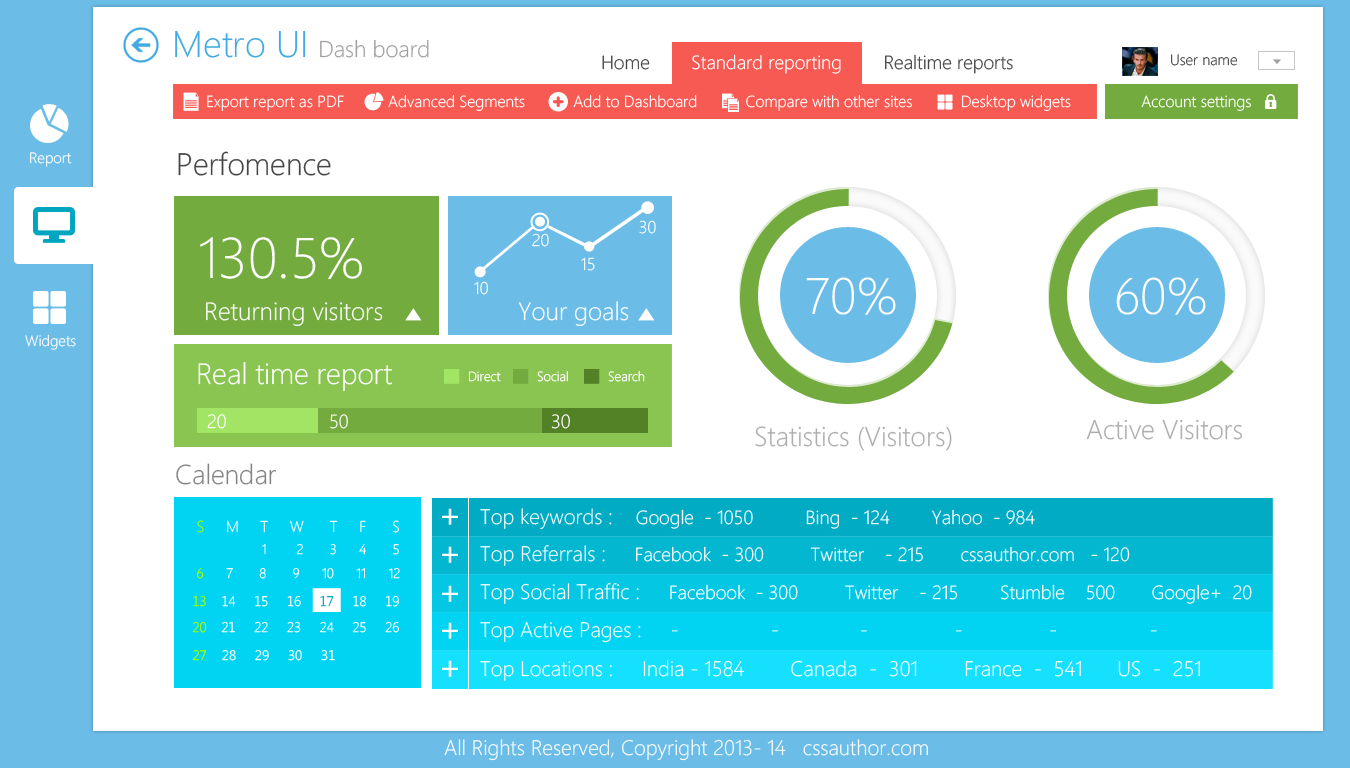
<style>
.page{position:relative;width:1350px;height:768px;background:#ffffff}
.page>*{position:absolute;margin:0}
.t1{font:23px "SegoeWP-Light";color:#9f9f9f}
.t2{font:37px "SegoeWP-Light";color:#41aae1}
.t3{font:19px "SegoeWP-Light";color:#ffffff}
.t4{font:19px "SegoeWP-Light";color:#454545}
.t5{font:15px "SegoeWP-Light"}
.t6{font:16px "SegoeWP-Light";color:#ffffff}
.t7{font:15px "SegoeWP-Light";color:#ffffff}
.t8{font:31px "SegoeWP-Light";color:#454545}
.t9{font:17px "SegoeWP-Light";color:#ffffff}
.t10{font:57.2px "SegoeWP-Light";color:#ffffff}
.t11{font:51.2px "SegoeWP-Light";color:#ffffff}
.t12{font:25px "SegoeWP-Light";color:#ffffff}
.t13{font:29.2px "SegoeWP-Light";color:#ffffff}
.t14{font:13.2px "SegoeWP-Light";color:#ffffff}
.t15{font:27.2px "SegoeWP-Light";color:#aeacac}
.t16{font:27.2px "SegoeWP-Light";color:#838383}
.t17{font:35px "SegoeWPN";color:#ffffff}
.t18{font:21px "SegoeWP-Light";color:#ffffff}
.t19{font:15.7px "SegoeWP-Light";color:#ffffff}
.t20{font:15.7px "SegoeWP-Light";color:#a1fe00}
.t21{font:13.7px "SegoeWP-Light";color:#ffffff}
.t22{font:13.7px "SegoeWP-Light";color:#a2ff00}
.t23{font:13.7px "SegoeWPN-Light";color:#ffffff}
.t24{font:13.7px "SegoeWPN-Light";color:#a2ff00}
.t25{font:13.7px "SegoeWPN-Light";color:#01abc4}
.t26{font:13.7px "SegoeWPN-Light";color:#a2ff01}
.t27{font:13.7px "SegoeWPN-SemiLight";color:#ffffff}
.t28{font:13.7px "SegoeWPN-SemiLight";color:#a2ff00}
</style>
<div class="page">
<p class="t1" style="left:175px;top:30px;width:254px;height:28px"><span class="t2">Metro UI </span>Dash board</p>
<p class="t3" style="left:602px;top:54px;width:411px;height:20px"><span class="t4">Home        </span>Standard reporting  <span class="t4">      Realtime reports</span></p>
<p class="t5" style="left:1171px;top:54px;width:67px;height:12px">User name</p>
<p class="t6" style="left:207px;top:95px;width:1044px;height:16px">Export report as PDF          Advanced Segments           Add to Dashboard           Compare with other sites           Desktop widgets                Account settings</p>
<p class="t7" style="left:30px;top:152px;width:42px;height:15px">Report</p>
<p class="t8" style="left:178px;top:151px;width:153px;height:25px">Perfomence</p>
<p class="t9" style="left:639px;top:220px;width:17px;height:14px">30</p>
<p class="t9" style="left:532px;top:233px;width:17px;height:14px">20</p>
<p class="t10" style="left:200px;top:237px;width:162px;height:42px">130.5%</p>
<p class="t9" style="left:581px;top:257px;width:14px;height:14px">15</p>
<p class="t9" style="left:474px;top:281px;width:14px;height:14px">10</p>
<p class="t11" style="left:806px;top:277px;width:90px;height:38px">70%</p>
<p class="t11" style="left:1116px;top:277px;width:90px;height:38px">60%</p>
<p class="t12" style="left:206px;top:302px;width:177px;height:24px">Returning visitors</p>
<p class="t12" style="left:518px;top:301px;width:111px;height:25px">Your goals</p>
<p class="t7" style="left:25px;top:334px;width:51px;height:16px">Widgets</p>
<p class="t13" style="left:198px;top:362px;width:194px;height:29px">Real time report</p>
<p class="t14" style="left:469px;top:371px;width:32px;height:11px">Direct</p>
<p class="t14" style="left:537px;top:371px;width:31px;height:11px">Social</p>
<p class="t14" style="left:608px;top:371px;width:37px;height:11px">Search</p>
<p class="t3" style="left:207px;top:414px;width:19px;height:15px">20</p>
<p class="t3" style="left:330px;top:414px;width:18px;height:15px">50</p>
<p class="t3" style="left:551px;top:414px;width:19px;height:15px">30</p>
<p class="t15" style="left:1086px;top:419px;width:156px;height:21px">Active Visitors</p>
<p class="t15" style="left:755px;top:426px;width:197px;height:25px">Statistics (Visitors)</p>
<p class="t16" style="left:176px;top:463px;width:101px;height:22px">Calendar</p>
<p class="t17" style="left:442px;top:508px;width:16px;height:17px">+</p>
<p class="t3" style="left:480px;top:508px;width:555px;height:22px"><span class="t18">Top keywords :    </span>Google  - 1050          Bing  - 124        Yahoo  - 984</p>
<p class="t19" style="left:197px;top:520px;width:203px;height:13px"><span class="t20">S</span>     M     T     W      T     F      S</p>
<p class="t21" style="left:262px;top:544px;width:137px;height:11px">1        2       3      4       5</p>
<p class="t3" style="left:480px;top:545px;width:650px;height:21px"><span class="t18">Top Referrals :     </span>Facebook  - 300         Twitter    - 215       cssauthor.com   - 120</p>
<p class="t17" style="left:442px;top:546px;width:16px;height:17px">+</p>
<p class="t21" style="left:197px;top:568px;width:203px;height:11px"><span class="t22">6</span>      7       8       9      10      11      12</p>
<p class="t17" style="left:442px;top:585px;width:16px;height:17px">+</p>
<p class="t3" style="left:480px;top:583px;width:772px;height:21px"><span class="t18">Top Social Traffic :     </span>Facebook  - 300         Twitter    - 215        Stumble    500       Google+  20</p>
<p class="t23" style="left:193px;top:595px;width:206px;height:12px"><span class="t24">13</span>    14     15     16     <span class="t25">17 </span>    18     19</p>
<p class="t23" style="left:192px;top:621px;width:207px;height:12px"><span class="t26">20</span>    21     22     23     24     25     26</p>
<p class="t17" style="left:442px;top:622px;width:16px;height:17px">+</p>
<p class="t18" style="left:480px;top:622px;width:677px;height:21px">Top Active Pages :     -                -              -               -               -                -</p>
<p class="t27" style="left:192px;top:650px;width:143px;height:11px"><span class="t28">27</span>    28     29     30     31</p>
<p class="t17" style="left:442px;top:660px;width:16px;height:17px">+</p>
<p class="t18" style="left:480px;top:660px;width:720px;height:21px">Top Locations :     India - 1584        Canada  -  301        France  -  541      US  -  251</p>
<p class="t18" style="left:444px;top:739px;width:484px;height:22px">All Rights Reserved, Copyright 2013- 14   cssauthor.com</p>
</div>
